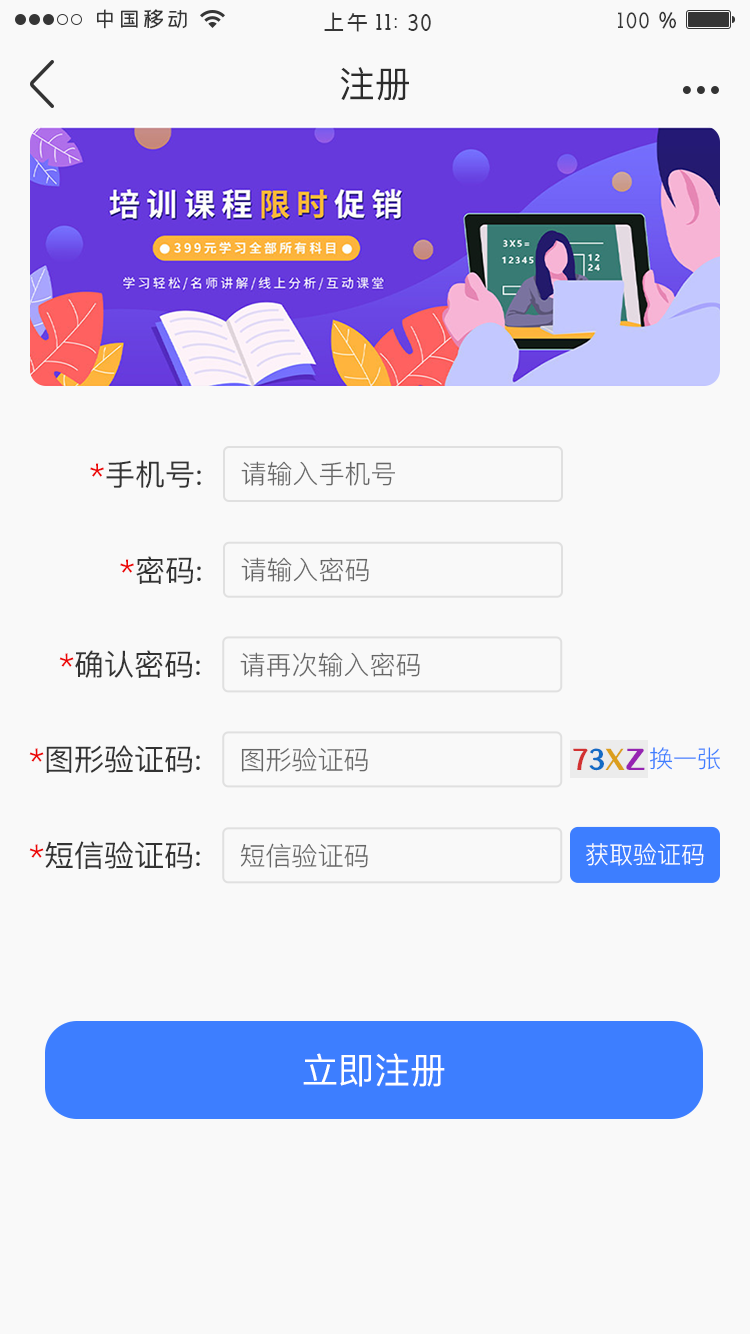
<style>
.page{position:relative;width:750px;height:1334px;background:#f9f9f9}
.page>*{position:absolute;margin:0}
.t1{font:36px "PingFang-SC-Medium";color:#2c2c2c;text-transform:uppercase}
.t2{font:30px "PingFang-SC-Medium";color:#333333}
.t3{font:30px "PingFang-SC-Medium";color:#ec0606}
.t4{font:26px "PingFang-SC-Regular";color:#666666}
.t5{font:28px "TsangerYuYangT-W05";color:#d23131}
.t6{font:28px "TsangerYuYangT-W05";color:#136bc5}
.t7{font:28px "TsangerYuYangT-W05";color:#db9e1c}
.t8{font:28px "TsangerYuYangT-W05";color:#9624b2}
.t9{font:24px "PingFang-SC-Regular";color:#3d7eff}
.t10{font:24px "PingFang-SC-Regular";color:#ffffff}
.t11{font:36px "PingFang-SC-Medium";color:#ffffff}
</style>
<div class="page">
<p class="t1" style="left:340px;top:67px;width:69px;height:34px">注册</p>
<p class="t2" style="left:90px;top:460px;width:111px;height:28px"><span class="t3">*</span>手机号:</p>
<p class="t4" style="left:241px;top:461px;width:154px;height:25px">请输入手机号</p>
<p class="t2" style="left:120px;top:556px;width:81px;height:28px"><span class="t3">*</span>密码:</p>
<p class="t4" style="left:241px;top:557px;width:128px;height:25px">请输入密码</p>
<p class="t2" style="left:59px;top:650px;width:141px;height:28px"><span class="t3">*</span>确认密码:</p>
<p class="t4" style="left:240px;top:652px;width:180px;height:25px">请再次输入密码</p>
<p class="t2" style="left:29px;top:745px;width:171px;height:28px"><span class="t3">*</span>图形验证码:</p>
<p class="t4" style="left:241px;top:748px;width:127px;height:24px">图形验证码</p>
<p class="t5" style="left:573px;top:748px;width:72px;height:23px">7<span class="t6">3</span><span class="t7">X</span><span class="t8">Z</span></p>
<p class="t9" style="left:650px;top:747px;width:70px;height:23px">换一张</p>
<p class="t2" style="left:29px;top:841px;width:171px;height:28px"><span class="t3">*</span>短信验证码:</p>
<p class="t4" style="left:240px;top:843px;width:128px;height:25px">短信验证码</p>
<p class="t10" style="left:586px;top:843px;width:118px;height:23px">获取验证码</p>
<p class="t11" style="left:303px;top:1053px;width:142px;height:34px">立即注册</p>
</div>
